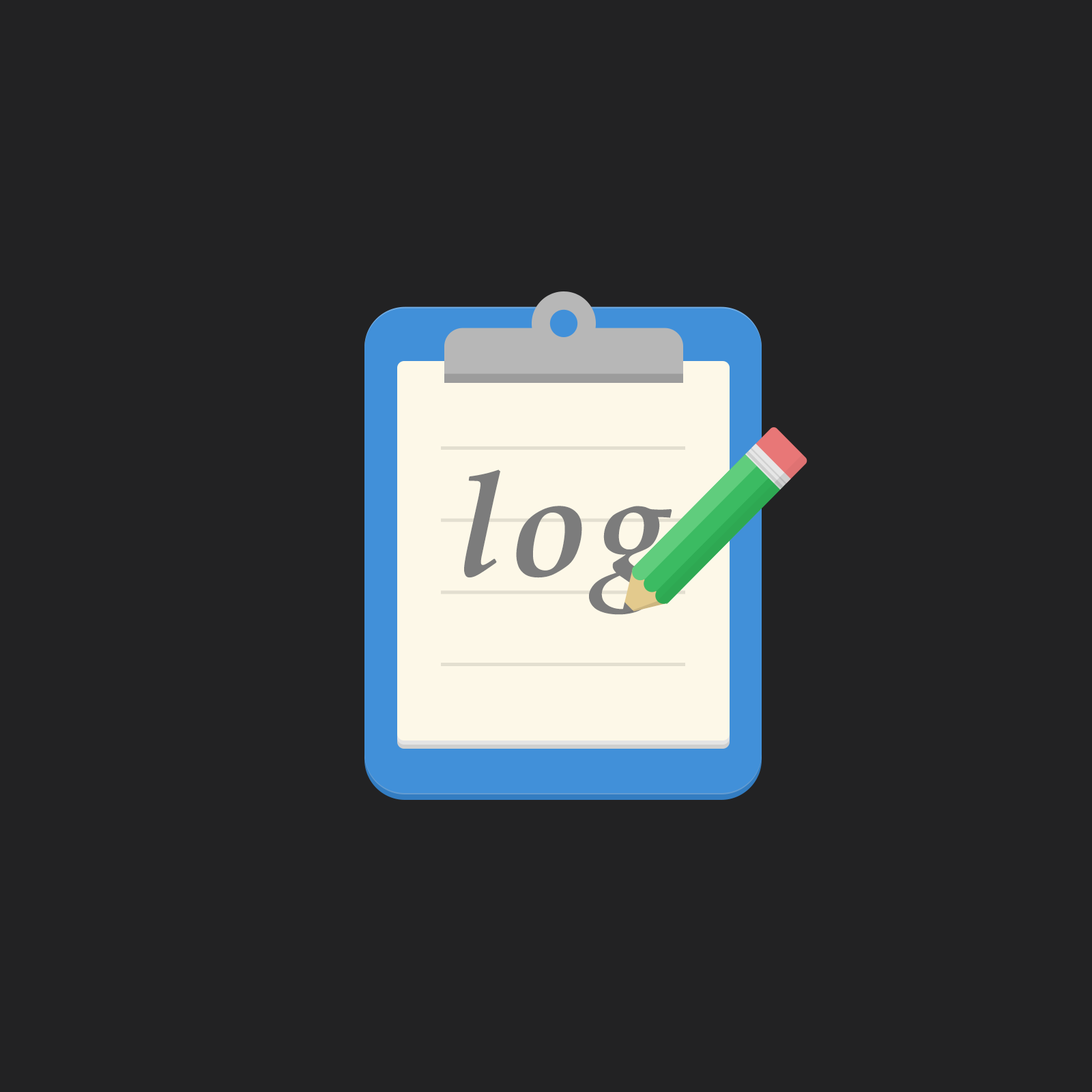
<style>
.page{position:relative;width:1092px;height:1092px;background:#222223}
.page>*{position:absolute;margin:0}
.t1{font:143.2px "PalatinoLinotype-BoldItalic";letter-spacing:0.05em;color:#7b7b7b}
</style>
<div class="page">
<p class="t1" style="left:464px;top:470px;width:208px;height:145px">log</p>
</div>
